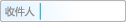
<style>
.page{position:relative;width:126px;height:22px;background:#ffffff}
.page>*{position:absolute;margin:0}
.t1{font:10px "MicrosoftYaHei";letter-spacing:-0.023em;color:#8b8b8b}
</style>
<div class="page">
<p class="t1" style="left:5px;top:6px;width:30px;height:11px">收件人</p>
</div>
